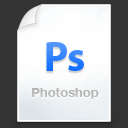
<style>
.page{position:relative;width:128px;height:128px;background:#333333}
.page>*{position:absolute;margin:0}
.t1{font:42px "MyriadPro-Bold"}
.t2{font:13px "HelveticaNeue-Bold";color:#cccccc}
</style>
<div class="page">
<p class="t1" style="left:46px;top:42px;width:38px;height:29px">Ps</p>
<p class="t2" style="left:32px;top:88px;width:67px;height:11px">Photoshop</p>
</div>
